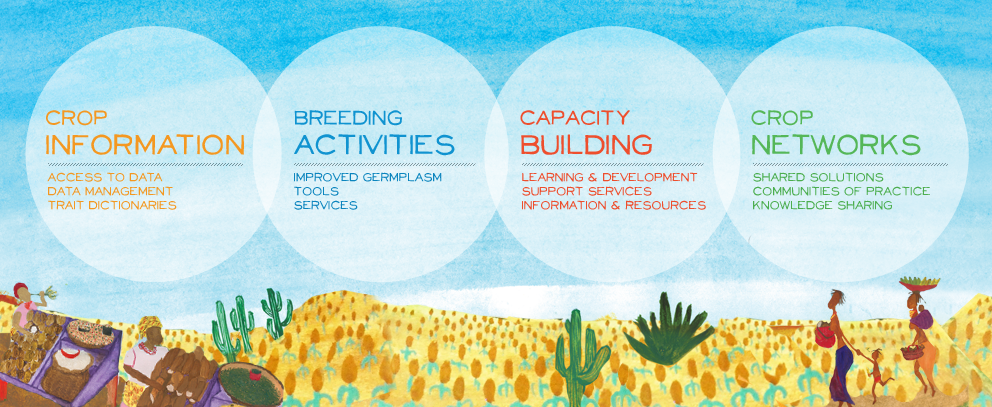
<style>
.page{position:relative;width:992px;height:407px}
.page>*{position:absolute;margin:0}
.t1{font:33px/30px "NeoRetroFill";letter-spacing:-0.1em;color:#f49821}
.t2{font:24px/30px "NeoRetroFill";letter-spacing:-0.1em;color:#f49821}
.t3{font:33px/30px "NeoRetroFill";letter-spacing:-0.1em;color:#1093d0}
.t4{font:24px/30px "NeoRetroFill";letter-spacing:-0.1em;color:#1093d0}
.t5{font:24px/30px "NeoRetroFill";letter-spacing:-0.1em;color:#ee4e2d}
.t6{font:33px/30px "NeoRetroFill";letter-spacing:-0.1em;color:#ee4e2d}
.t7{font:33px/30px "NeoRetroFill";letter-spacing:-0.1em;color:#55b758}
.t8{font:24px/30px "NeoRetroFill";letter-spacing:-0.1em;color:#55b758}
.t9{font:14px/14px "NeoRetroFill";letter-spacing:-0.1em;color:#f49821}
.t10{font:14px/14px "NeoRetroFill";letter-spacing:-0.1em;color:#0c85be}
.t11{font:14px/14px "NeoRetroFill";letter-spacing:-0.1em;color:#ee4e2d}
.t12{font:14px/14px "NeoRetroFill";letter-spacing:-0.1em;color:#4cae4f}
</style>
<div class="page">
<p class="t1" style="left:46px;top:110px;width:198px;height:45px"><span class="t2">Crop<br></span>Information</p>
<p class="t3" style="left:294px;top:110px;width:161px;height:46px"><span class="t4">Breeding<br></span>Activities</p>
<p class="t5" style="left:520px;top:110px;width:132px;height:45px">Capacity<br><span class="t6">Building</span></p>
<p class="t7" style="left:751px;top:110px;width:170px;height:46px"><span class="t8">Crop<br></span>Networks</p>
<p class="t9" style="left:47px;top:172px;width:130px;height:38px">Access to data<br>Data Management<br>Trait Dictionaries</p>
<p class="t10" style="left:294px;top:172px;width:148px;height:38px">Improved germplasm<br>Tools<br>Services</p>
<p class="t11" style="left:522px;top:172px;width:184px;height:38px">Learning &amp; Development<br>Support Services<br>Information &amp; Resources</p>
<p class="t12" style="left:753px;top:172px;width:177px;height:38px">Shared solutions<br>Communities of practice<br>Knowledge sharing</p>
</div>
